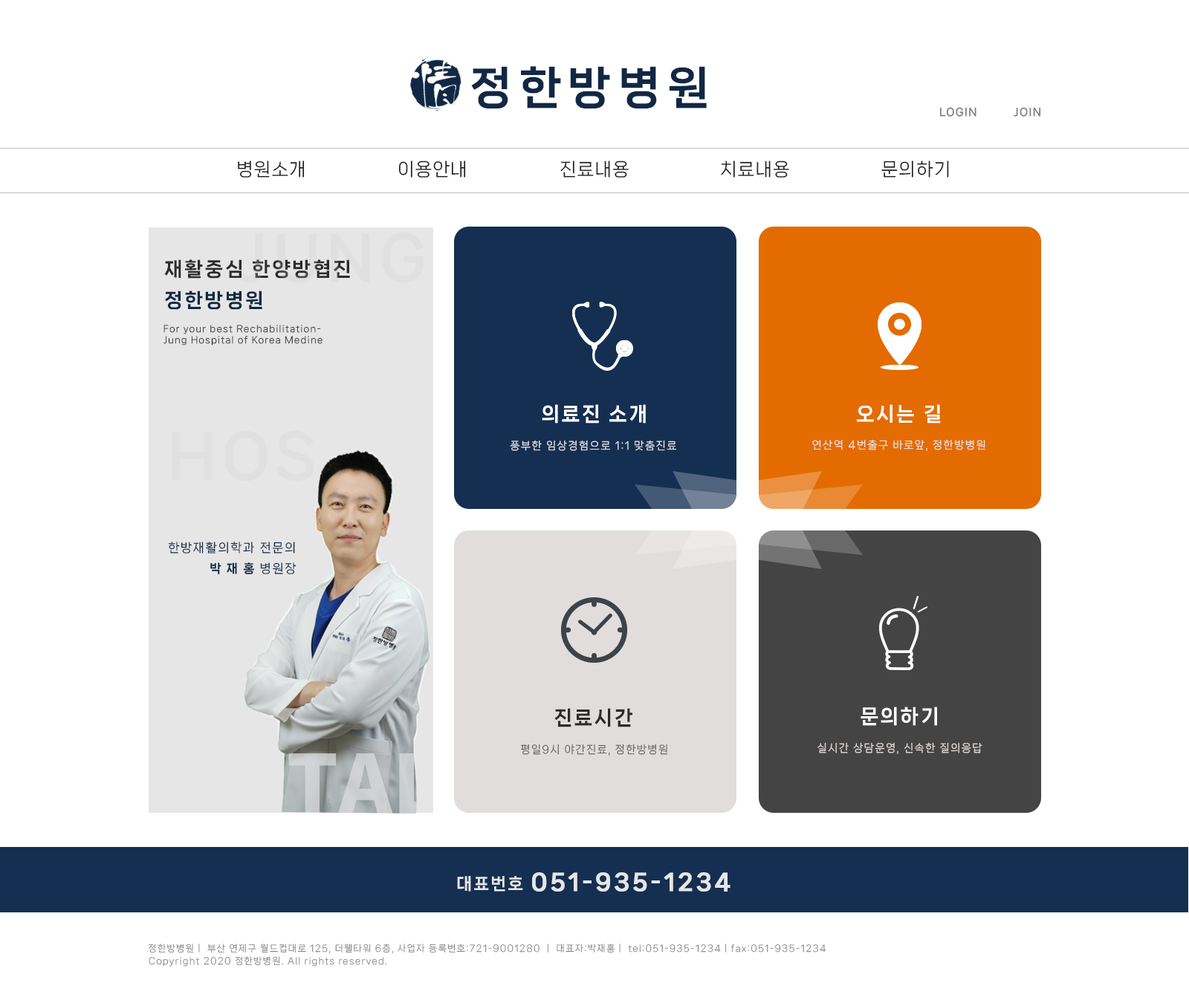
<style>
.page{position:relative;width:1189px;height:1003px;background:#ffffff}
.page>*{position:absolute;margin:0}
.t1{font:44.3px "NanumSquareNeoTTF-dEb";letter-spacing:0.16em;color:#112844}
.t2{font:10.5px "NanumSquareNeoTTF-dEb";letter-spacing:0.1em;color:#828383}
.t3{font:17.8px "NanumSquareNeoTTF-bRg";letter-spacing:0.042em;color:#222223}
.t4{font:19.3px "NanumSquareNeoTTF-dEb";letter-spacing:0.1em;color:#2d2c2c}
.t5{font:19.3px "NanumSquareNeoTTF-dEb";letter-spacing:0.1em;color:#112844}
.t6{font:8.9px/11.2px "NanumSquareNeoTTF-bRg";letter-spacing:0.1em;color:#2d2c2c}
.t7{font:19.5px "NanumSquareNeoTTF-dEb";letter-spacing:0.1em;color:#ffffff}
.t8{font:19.3px "NanumSquareNeoTTF-dEb";letter-spacing:0.1em;color:#ffffff}
.t9{font:59.4px "NanumSquareNeoTTF-dEb";letter-spacing:0.1em;color:#e0e0e0}
.t10{font:10.5px "NanumSquareNeoTTF-bRg";letter-spacing:0.1em;color:#e6e6e6}
.t11{font:10.4px "NanumSquareNeoTTF-bRg";letter-spacing:0.1em;color:#e6e6e6}
.t12{font:12px "NanumSquareNeoTTF-bRg";letter-spacing:0.1em;color:#112844}
.t13{font:12px "NanumSquareNeoTTF-dEb";letter-spacing:0.1em;color:#112844}
.t14{font:19.6px "NanumSquareNeoTTF-dEb";letter-spacing:0.1em;color:#2b2a2a}
.t15{font:10.6px "NanumSquareNeoTTF-bRg";letter-spacing:0.1em;color:#626161}
.t16{font:10.6px "NanumSquareNeoTTF-bRg";letter-spacing:0.1em;color:#e6dfdc}
.t17{font:22.3px "NanumSquareNeoTTF-dEb";letter-spacing:0.1em;color:#e6e6e6;font-weight:bold}
.t18{font:16.4px "NanumSquareNeoTTF-dEb";letter-spacing:0.1em;color:#e6e6e6}
.t19{font:9px "NanumSquareNeoTTF-bRg";letter-spacing:0.1em;color:#8c8989}
</style>
<div class="page">
<p class="t1" style="left:471px;top:66px;width:236px;height:42px">정한방병원</p>
<p class="t2" style="left:939px;top:107px;width:37px;height:10px">LOGIN</p>
<p class="t2" style="left:1013px;top:107px;width:28px;height:10px">JOIN</p>
<p class="t3" style="left:238px;top:160px;width:67px;height:18px">병원소개</p>
<p class="t3" style="left:398px;top:160px;width:68px;height:18px">이용안내</p>
<p class="t3" style="left:560px;top:160px;width:69px;height:18px">진료내용</p>
<p class="t3" style="left:721px;top:160px;width:68px;height:18px">치료내용</p>
<p class="t3" style="left:881px;top:160px;width:68px;height:18px">문의하기</p>
<p class="t4" style="left:164px;top:259px;width:186px;height:20px">재활중심 한양방협진</p>
<p class="t5" style="left:165px;top:291px;width:97px;height:19px">정한방병원</p>
<p class="t6" style="left:163px;top:325px;width:159px;height:20px">For your best Rechabilitation-<br>Jung Hospital of Korea Medine</p>
<p class="t7" style="left:542px;top:404px;width:104px;height:20px">의료진 소개</p>
<p class="t8" style="left:857px;top:404px;width:84px;height:20px">오시는 길</p>
<p class="t9" style="left:172px;top:430px;width:142px;height:51px">HOS</p>
<p class="t10" style="left:510px;top:440px;width:167px;height:11px">풍부한 임상경험으로 1:1 맞춤진료</p>
<p class="t11" style="left:812px;top:439px;width:173px;height:12px">연산역 4번출구 바로앞, 정한방병원</p>
<p class="t12" style="left:168px;top:542px;width:127px;height:12px">한방재활의학과 전문의</p>
<p class="t13" style="left:210px;top:562px;width:86px;height:12px">박 재 홍 <span class="t12">병원장</span></p>
<p class="t14" style="left:554px;top:708px;width:78px;height:19px">진료시간</p>
<p class="t7" style="left:860px;top:707px;width:77px;height:19px">문의하기</p>
<p class="t15" style="left:521px;top:744px;width:147px;height:12px">평일9시 야간진료, 정한방병원</p>
<p class="t16" style="left:817px;top:742px;width:165px;height:12px">실시간 상담운영, 신속한 질의응답</p>
<p class="t17" style="left:457px;top:872px;width:273px;height:20px"><span class="t18">대표번호 </span>051-935-1234</p>
<p class="t19" style="left:148px;top:944px;width:678px;height:10px">정한방병원ㅣ 부산 연제구 월드컵대로 125, 더웰타워 6층, 사업자 등록번호:721-9001280 ㅣ 대표자:박재홍ㅣ tel:051-935-1234ㅣfax:051-935-1234</p>
<p class="t19" style="left:149px;top:956px;width:238px;height:11px">Copyright 2020 정한방병원. All rights reserved.</p>
</div>
